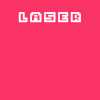
<style>
.page{position:relative;width:100px;height:100px;background:#f93366}
.page>*{position:absolute;margin:0}
.t1{font:11px "SmallHollows";letter-spacing:0.025em;color:#ffffff}
</style>
<div class="page">
<p class="t1" style="left:18px;top:12px;width:63px;height:11px">LASER²</p>
</div>
